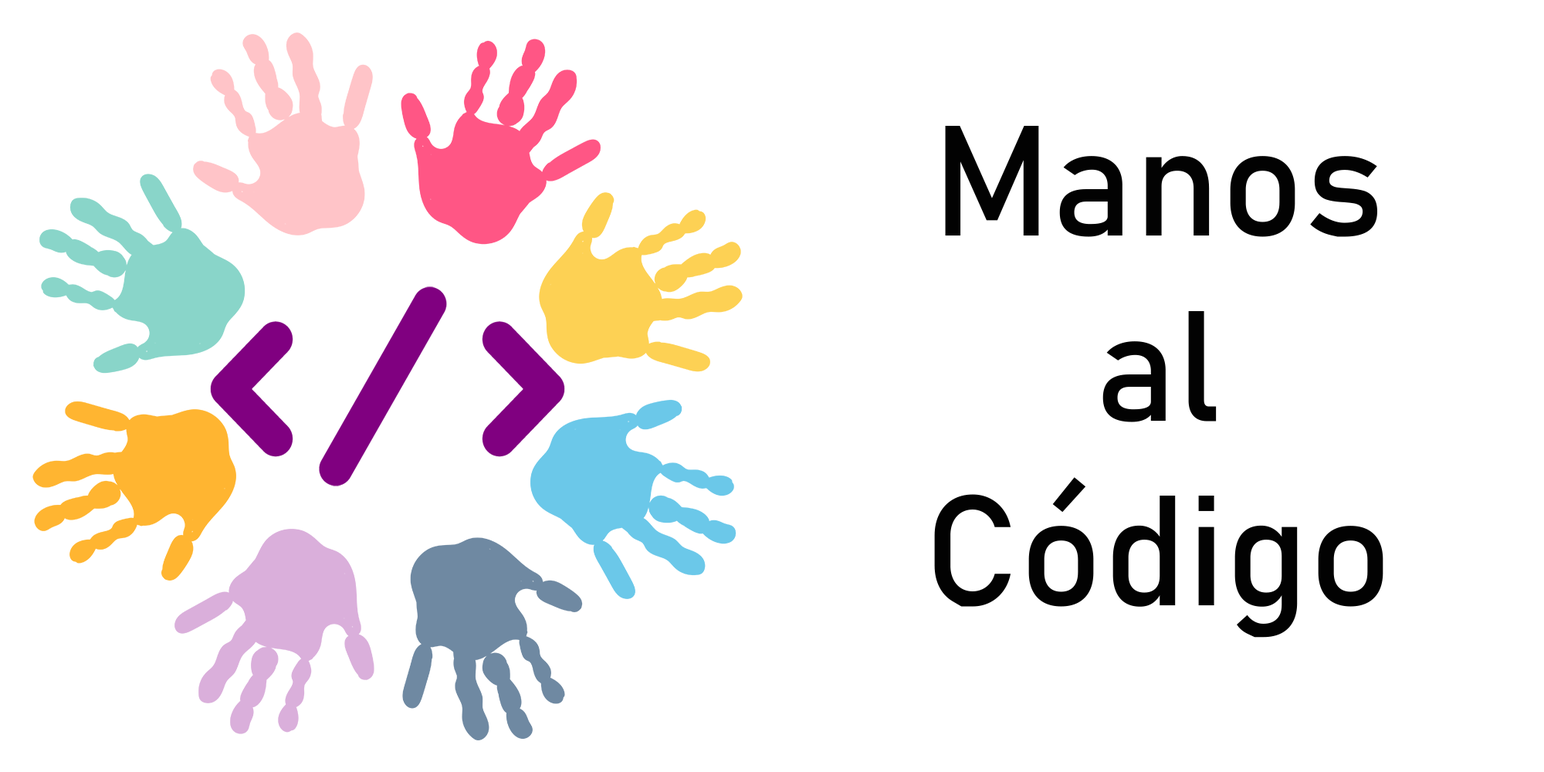
<style>
.page{position:relative;width:1544px;height:772px;background:#ffffff}
.page>*{position:absolute;margin:0}
.t1{font:154.1px "Bahnschrift";color:#020202}
</style>
<div class="page">
<p class="t1" style="left:934px;top:126px;width:450px;height:512px;text-align:center">Manos<br>al<br>Código</p>
</div>
